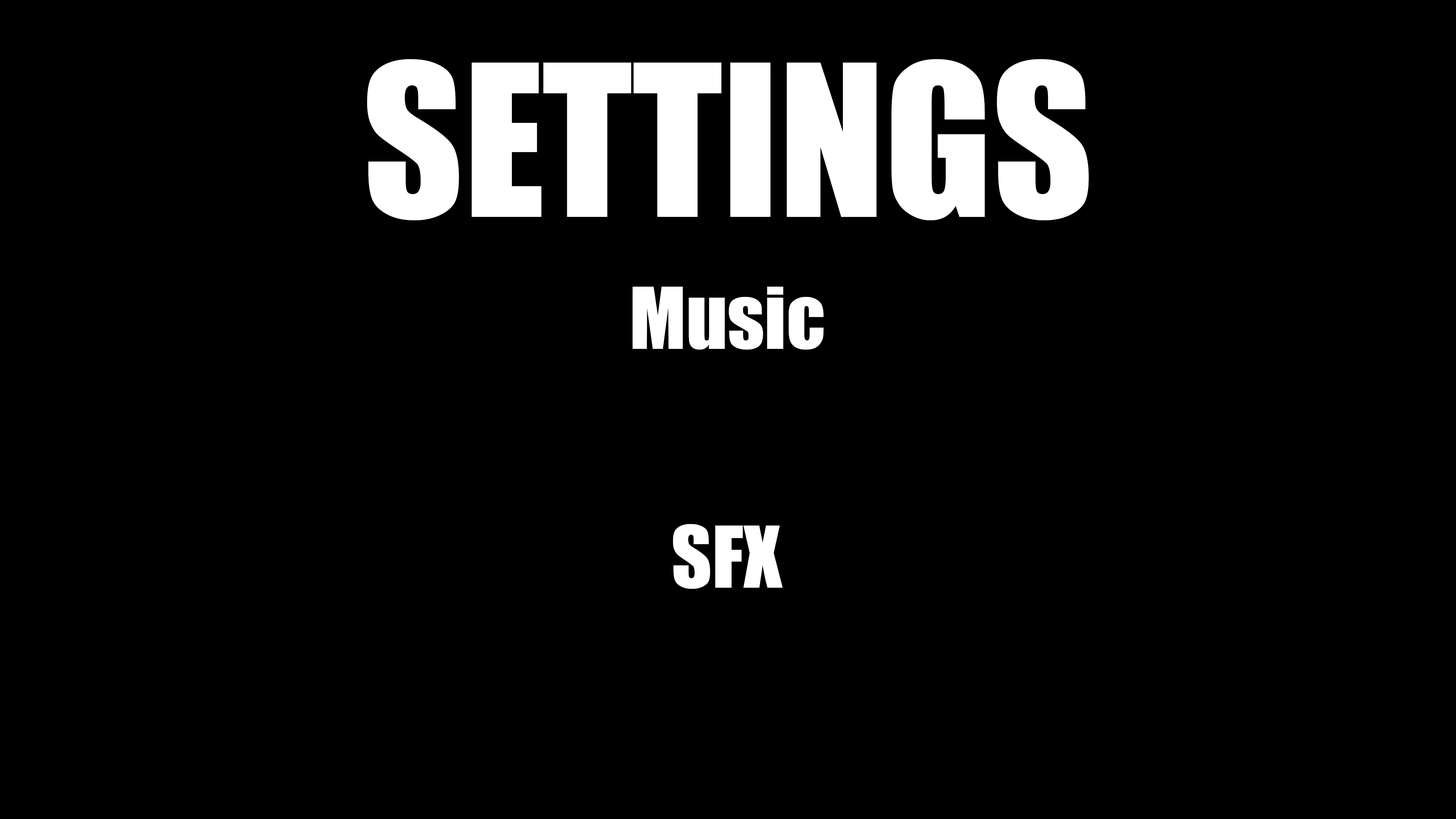
<style>
.page{position:relative;width:1456px;height:819px;background:#000000}
.page>*{position:absolute;margin:0}
.t1{font:195.4px "Impact";color:#ffffff}
.t2{font:79px "Impact";color:#ffffff}
</style>
<div class="page">
<p class="t1" style="left:367px;top:59px;width:722px;height:161px">SETTINGS</p>
<p class="t2" style="left:632px;top:287px;width:192px;height:63px">Music</p>
<p class="t2" style="left:673px;top:524px;width:110px;height:65px">SFX</p>
</div>
